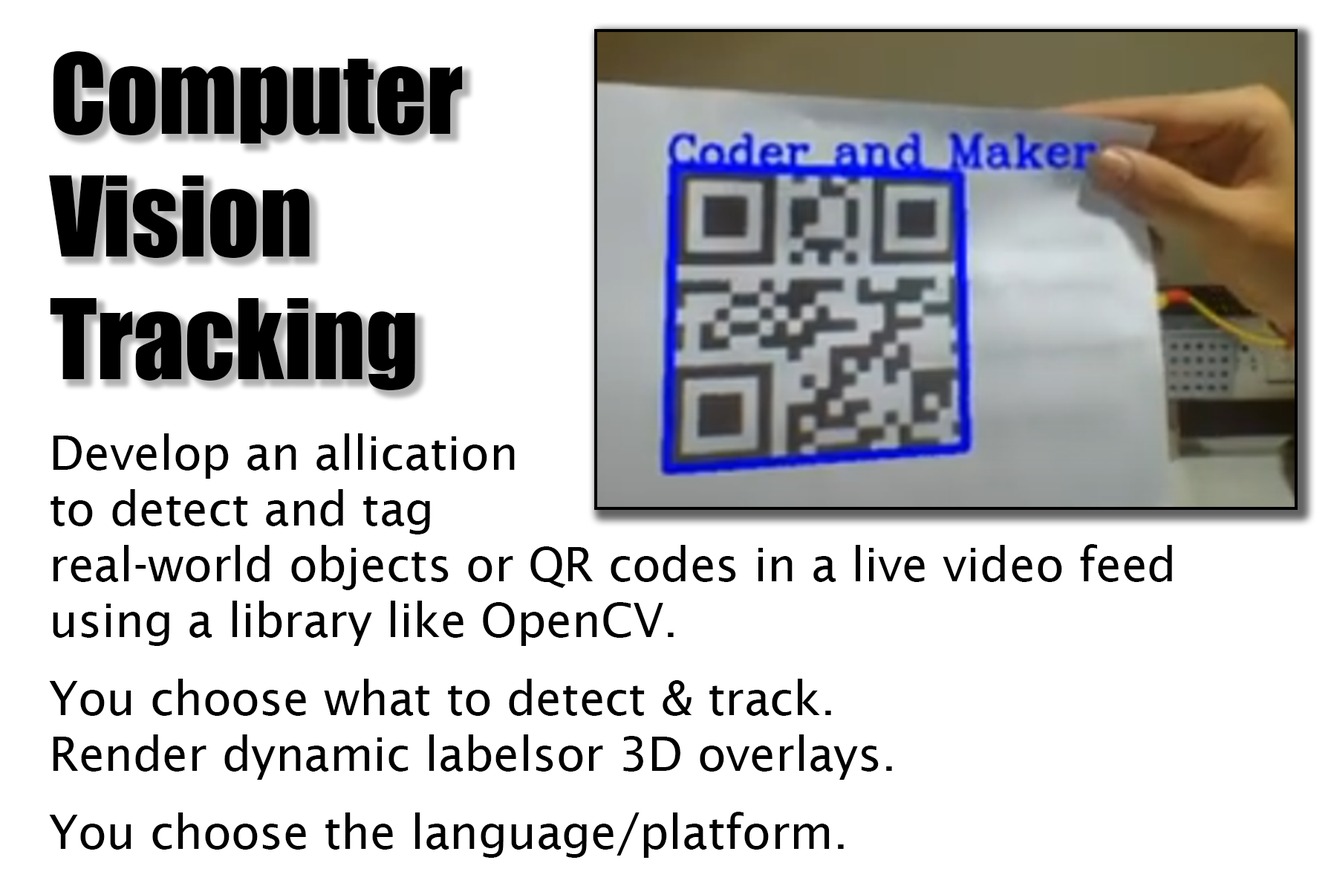
<style>
.page{position:relative;width:1337px;height:892px;background:#ffffff}
.page>*{position:absolute;margin:0}
.t1{font:102.2px "Impact";color:#000000}
.t2{font:46.4px "LucidaSans";color:#000000}
</style>
<div class="page">
<p class="t1" style="left:49px;top:51px;width:414px;height:339px">Computer <br>Vision <br>Tracking</p>
<p class="t2" style="left:49px;top:433px;width:1123px;height:424px">Develop an allication<br>to detect and tag <br>real-world objects or QR codes in a live video feed <br>using a library like OpenCV.<br><br>You choose what to detect &amp; track.<br>Render dynamic labelsor 3D overlays.<br><br>You choose the language/platform.</p>
</div>
